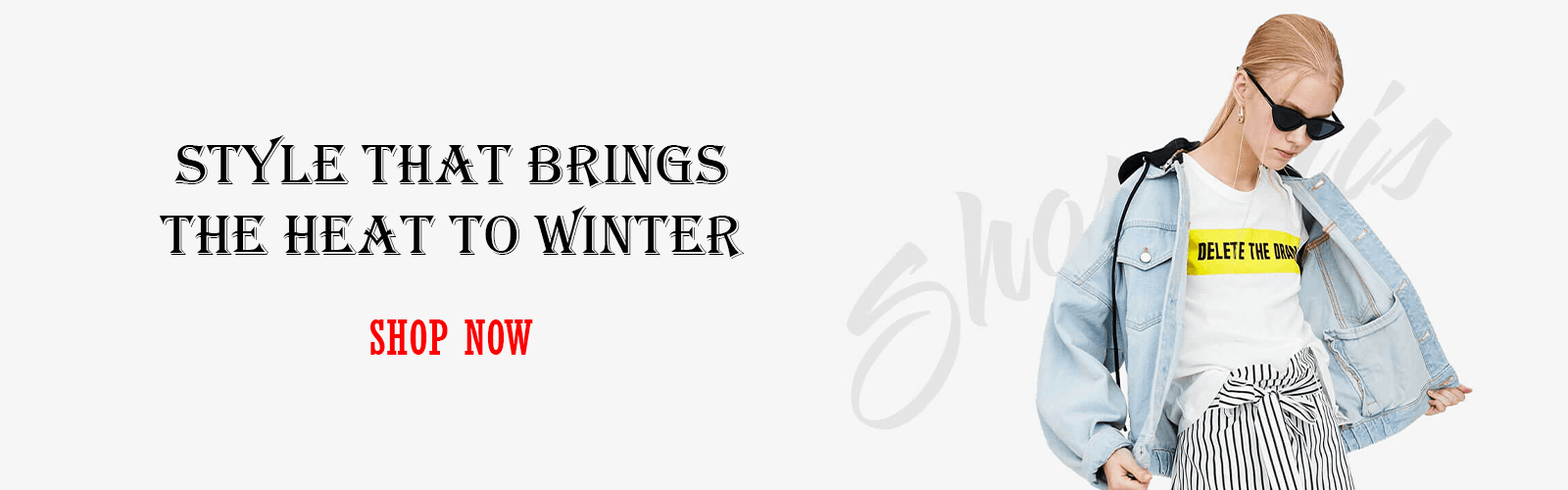
<style>
.page{position:relative;width:1568px;height:490px;background:#f6f6f6}
.page>*{position:absolute;margin:0}
.t1{font:58.8px "Algerian";color:#010101}
.t2{font:47px "Rockwell-Condensed";color:#fb0000}
</style>
<div class="page">
<p class="t1" style="left:159px;top:134px;width:586px;height:125px;text-align:center">Style That Brings<br>the Heat to Winter</p>
<p class="t2" style="left:369px;top:319px;width:164px;height:36px">SHOP NOW</p>
</div>
